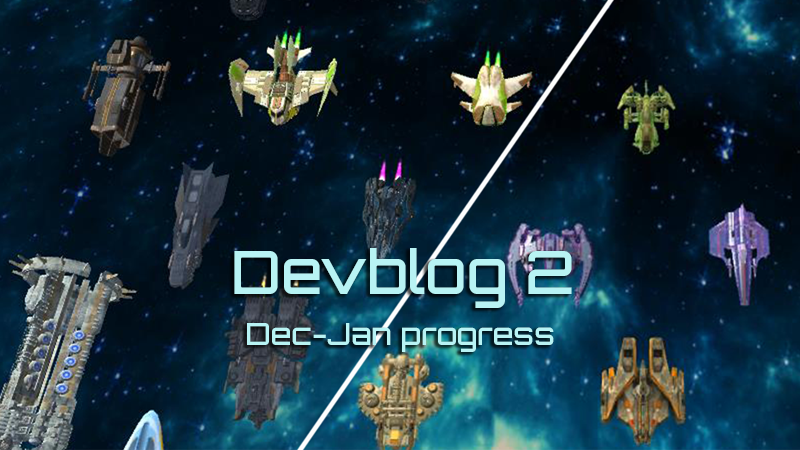
<style>
.page{position:relative;width:800px;height:450px}
.page>*{position:absolute;margin:0}
.t1{font:60px "Orbitron-Medium";color:#b8f3f4}
.t2{font:30px "Orbitron-Medium";color:#b8f3f4}
</style>
<div class="page">
<p class="t1" style="left:234px;top:248px;width:338px;height:60px">Devblog 2</p>
<p class="t2" style="left:247px;top:323px;width:307px;height:29px">Dec-Jan progress</p>
</div>
